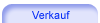
<style>
.page{position:relative;width:100px;height:23px;background:#e1e4fc}
.page>*{position:absolute;margin:0}
.t1{font:11px "ArialMT";color:#092ff6}
</style>
<div class="page">
<p class="t1" style="left:32px;top:11px;width:38px;height:8px">Verkauf</p>
</div>
